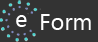
<style>
.page{position:relative;width:98px;height:42px;background:#333333}
.page>*{position:absolute;margin:0}
.t1{font:40px "SegoeUI";color:#ffffff}
</style>
<div class="page">
<p class="t1" style="left:16px;top:15px;width:11px;height:12px">e</p>
<p class="t1" style="left:41px;top:14px;width:50px;height:16px">Form</p>
</div>
